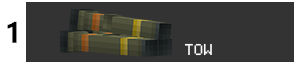
<style>
.page{position:relative;width:300px;height:64px;background:#333333}
.page>*{position:absolute;margin:0}
.t1{font:12.6px "Minecraft";color:#ffffff}
</style>
<div class="page">
<p class="t1" style="left:184px;top:43px;width:28px;height:13px">TOW</p>
</div>
